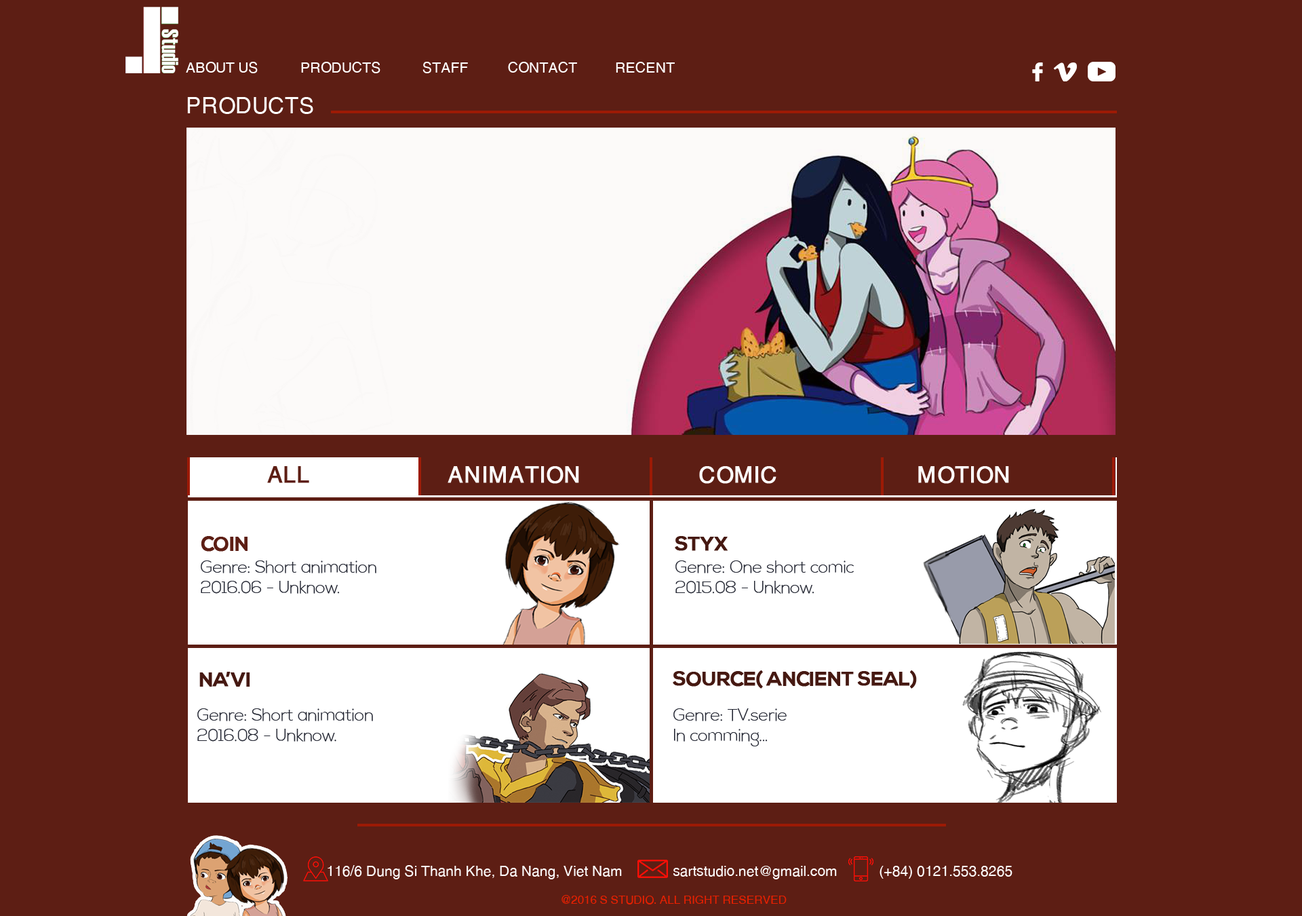
<style>
.page{position:relative;width:1302px;height:916px;background:#5d1e14}
.page>*{position:absolute;margin:0}
.t1{font:14.1px "SVN-Helves";letter-spacing:-0.02em;color:#ffffff;text-transform:uppercase}
.t2{font:22.6px "SVN-Helves";letter-spacing:-0.02em;color:#ffffff;text-transform:uppercase}
.t3{font:22.6px "SVN-Helves";letter-spacing:-0.02em;color:#5d1e14;text-transform:uppercase;font-weight:bold}
.t4{font:22.6px "SVN-Helves";letter-spacing:-0.02em;color:#fdfcfc;text-transform:uppercase;font-weight:bold}
.t5{font:19.8px "SVN-NexaBold";letter-spacing:-0.02em;color:#5d1e14;text-transform:uppercase;font-weight:bold}
.t6{font:19.8px "SVN-NexaBold";letter-spacing:-0.02em;color:#461912;text-transform:uppercase;font-weight:bold}
.t7{font:17px "SVN-NexaLight";letter-spacing:-0.02em;color:#252834}
.t8{font:14.1px "SVN-Helves";letter-spacing:-0.02em;color:#fdfcfc}
.t9{font:11.3px "SVN-Helves";letter-spacing:-0.02em;color:#e62001;text-transform:uppercase}
</style>
<div class="page">
<p class="t1" style="left:186px;top:62px;width:72px;height:11px">about us</p>
<p class="t1" style="left:301px;top:62px;width:80px;height:11px">Products</p>
<p class="t1" style="left:423px;top:62px;width:45px;height:11px">Staff</p>
<p class="t1" style="left:508px;top:62px;width:69px;height:11px">Contact</p>
<p class="t1" style="left:616px;top:62px;width:59px;height:11px">recent</p>
<p class="t2" style="left:187px;top:97px;width:126px;height:17px">PRODUCTS</p>
<p class="t3" style="left:267px;top:466px;width:42px;height:17px">ALL</p>
<p class="t4" style="left:448px;top:466px;width:131px;height:18px">animation</p>
<p class="t4" style="left:699px;top:466px;width:78px;height:18px">comic</p>
<p class="t4" style="left:918px;top:466px;width:91px;height:18px">motion</p>
<p class="t5" style="left:201px;top:536px;width:47px;height:15px">Coin</p>
<p class="t6" style="left:675px;top:536px;width:53px;height:15px">Styx</p>
<p class="t7" style="left:201px;top:560px;width:175px;height:33px">Genre: Short animation<br>2016.06 - Unknow.</p>
<p class="t7" style="left:676px;top:560px;width:178px;height:33px">Genre: One short comic<br>2015.08 - Unknow.</p>
<p class="t6" style="left:199px;top:671px;width:51px;height:15px">na’vi</p>
<p class="t6" style="left:673px;top:670px;width:244px;height:18px">Source( ancient SEAL)</p>
<p class="t7" style="left:197px;top:708px;width:176px;height:33px">Genre: Short animation<br>2016.08 - Unknow.</p>
<p class="t7" style="left:674px;top:708px;width:113px;height:38px">Genre: TV.serie<br>In comming...</p>
<p class="t8" style="left:328px;top:865px;width:294px;height:14px">116/6 Dung Si Thanh Khe, Da Nang, Viet Nam</p>
<p class="t8" style="left:673px;top:865px;width:164px;height:14px">sartstudio.net@ gmail.com</p>
<p class="t8" style="left:880px;top:865px;width:133px;height:13px">(+84) 0121.553.8265</p>
<p class="t9" style="left:562px;top:895px;width:225px;height:9px">@ 2016 S studio. all right reserved</p>
</div>
